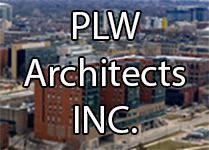
<style>
.page{position:relative;width:209px;height:150px}
.page>*{position:absolute;margin:0}
.t1{font:39.3px "MyriadPro-Regular";color:#ffffff}
</style>
<div class="page">
<p class="t1" style="left:24px;top:12px;width:161px;height:121px;text-align:center">PLW<br>Architects<br>INC.</p>
</div>
